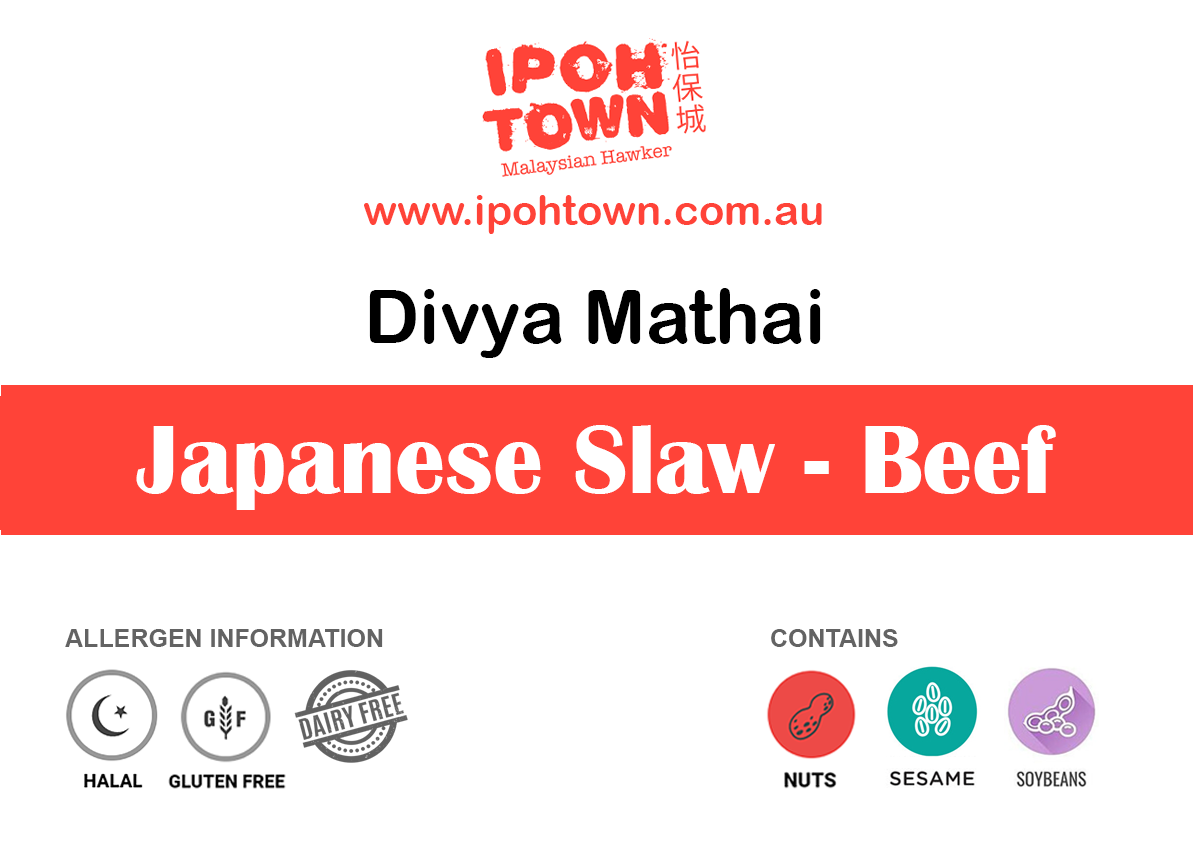
<style>
.page{position:relative;width:1193px;height:850px;background:#ffffff}
.page>*{position:absolute;margin:0}
.t1{font:41.7px "ArialRoundedMTBold";color:#ff4338}
.t2{font:75px "ArialRoundedMTBold";color:#000000}
.t3{font:100px "BritannicBold";color:#ffffff}
.t4{font:25px "Arial-BoldMT";color:#636363}
</style>
<div class="page">
<p class="t1" style="left:364px;top:195px;width:458px;height:39px">www.ipohtown.com.au</p>
<p class="t2" style="left:369px;top:288px;width:452px;height:70px">Divya Mathai</p>
<p class="t3" style="left:136px;top:425px;width:920px;height:85px">Japanese Slaw - Beef</p>
<p class="t4" style="left:65px;top:629px;width:318px;height:18px">ALLERGEN INFORMATION</p>
<p class="t4" style="left:771px;top:629px;width:127px;height:18px">CONTAINS</p>
</div>
